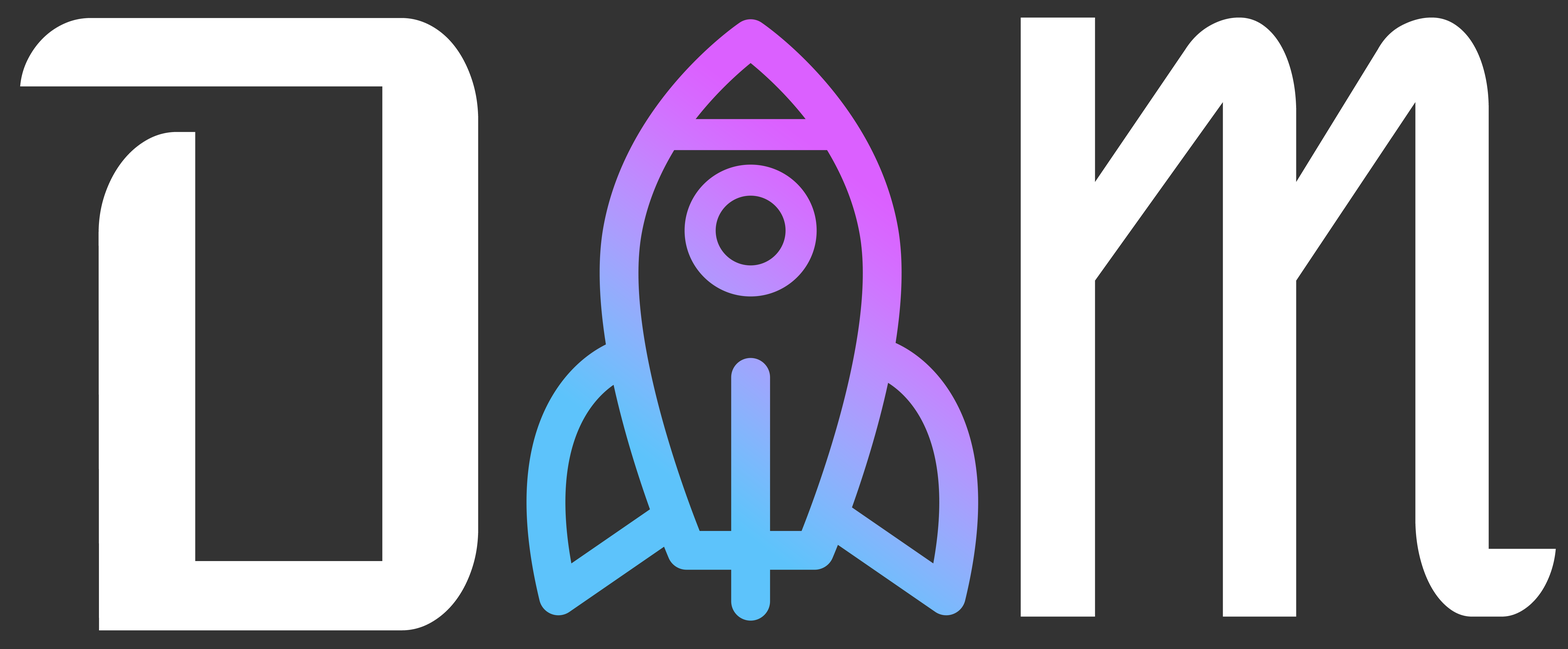
<style>
.page{position:relative;width:1568px;height:649px;background:#333333}
.page>*{position:absolute;margin:0}
.t1{font:827.7px "AtomicAge-Regular";color:#ffffff}
.t2{font:809.7px "AtomicAge-Regular";color:#ffffff;scale:0.79 1}
</style>
<div class="page">
<p class="t1" style="left:20px;top:18px;width:458px;height:613px">D</p>
<p class="t2" style="left:1021px;top:17px;width:535px;height:600px">M</p>
</div>
